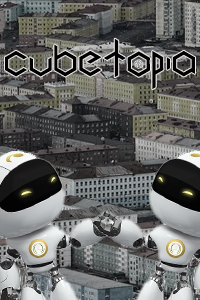
<style>
.page{position:relative;width:200px;height:300px}
.page>*{position:absolute;margin:0}
.t1{font:30px "Cubic";color:#000000}
</style>
<div class="page">
<p class="t1" style="left:5px;top:38px;width:190px;height:52px">CUBETOPIA</p>
</div>
